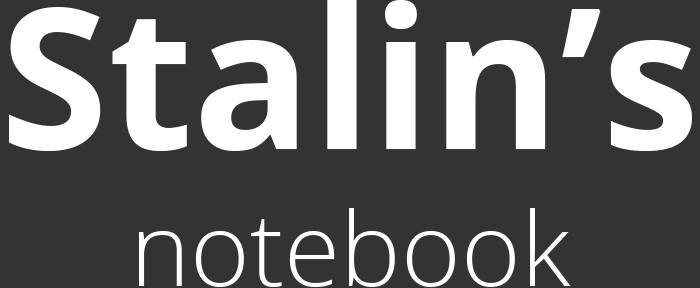
<style>
.page{position:relative;width:700px;height:288px;background:#333333}
.page>*{position:absolute;margin:0}
.t1{font:196px "OpenSans-Bold";color:#ffffff}
.t2{font:102px "OpenSans-Light";color:#ffffff}
</style>
<div class="page">
<p class="t1" style="left:9px;top:0px;width:683px;height:151px">Stalin’s</p>
<p class="t2" style="left:139px;top:208px;width:432px;height:79px">notebook</p>
</div>
